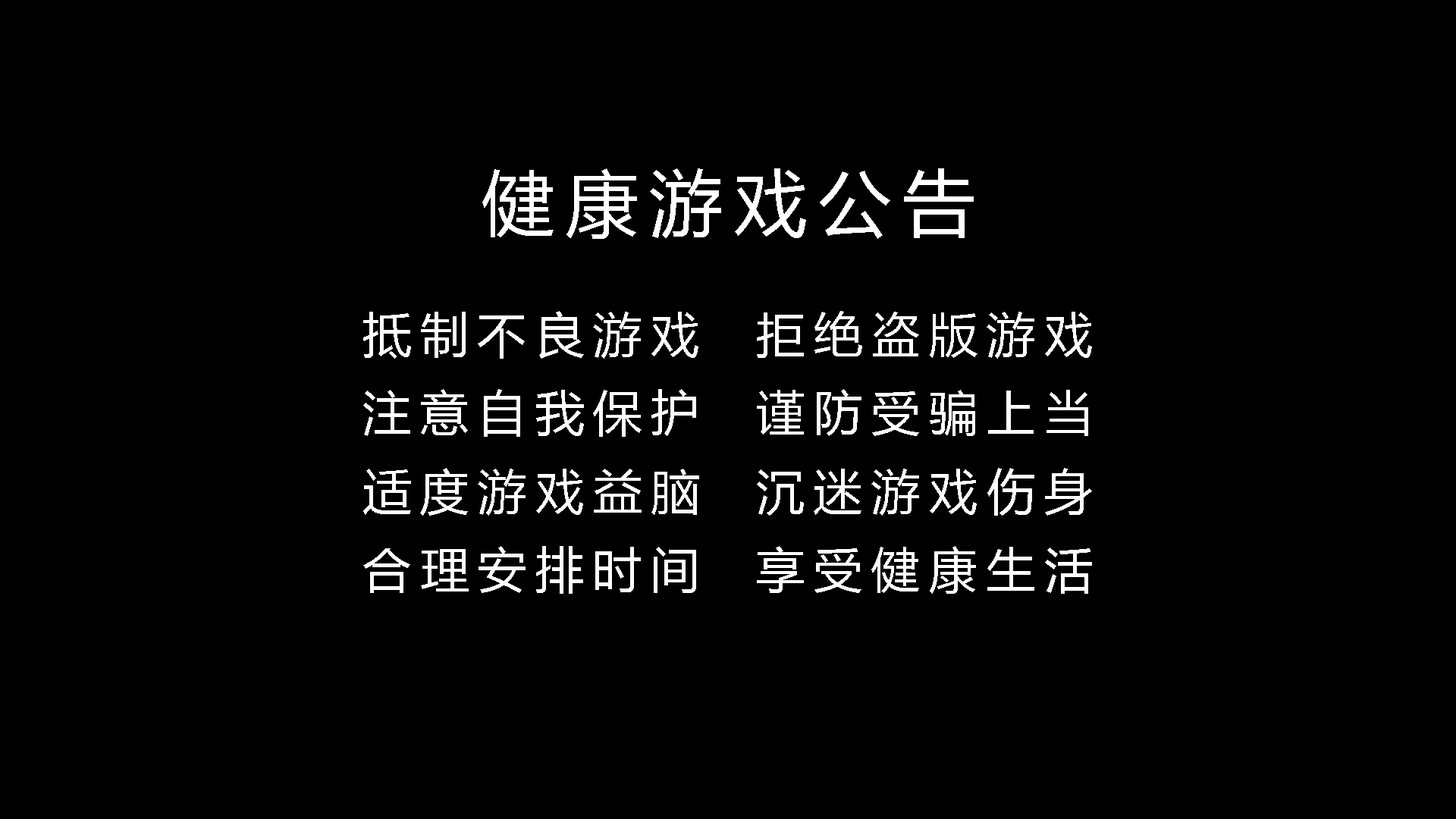
<style>
.page{position:relative;width:1456px;height:819px;background:#000000}
.page>*{position:absolute;margin:0}
.t1{font:72.8px "MicrosoftYaHei";letter-spacing:0.158em;color:#ffffff}
.t2{font:48.5px "MicrosoftYaHei";letter-spacing:0.19em;color:#ffffff}
</style>
<div class="page">
<p class="t1" style="left:482px;top:168px;width:492px;height:71px">健康游戏公告</p>
<p class="t2" style="left:363px;top:311px;width:729px;height:283px">抵制不良游戏  拒绝盗版游戏<br>注意自我保护  谨防受骗上当<br>适度游戏益脑  沉迷游戏伤身<br>合理安排时间  享受健康生活</p>
</div>
